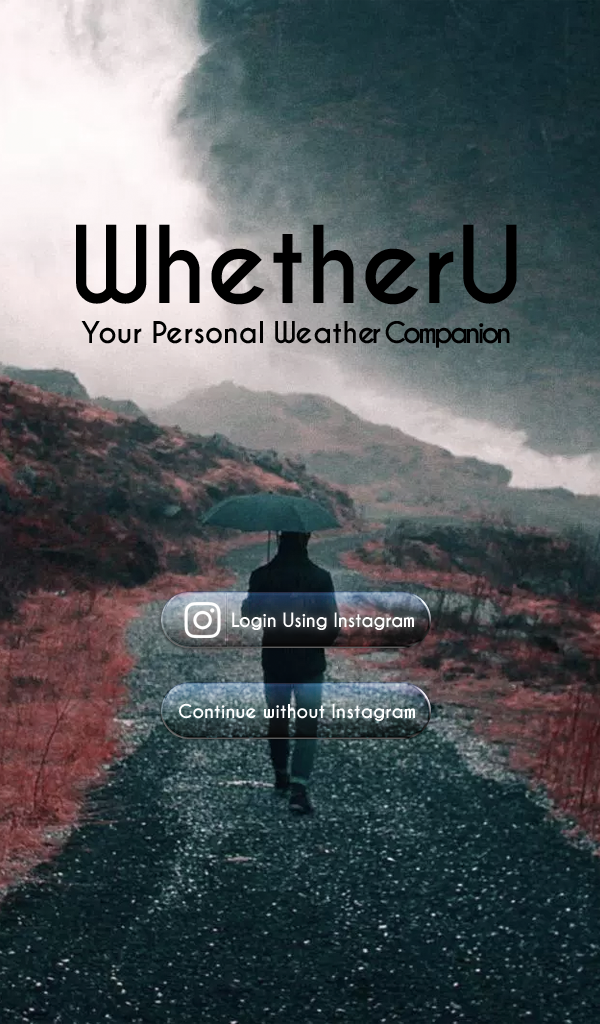
<style>
.page{position:relative;width:600px;height:1024px}
.page>*{position:absolute;margin:0}
.t1{font:28px/20px "CaviarDreams-Bold";color:#000000}
.t2{font:100px/20px "CaviarDreams-Bold";color:#000000}
.t3{font:28px/20px "CaviarDreams-Bold";letter-spacing:-0.12em;color:#000000}
.t4{font:18.5px "CaviarDreams-Bold";letter-spacing:-0.02em;color:#ffffff}
.t5{font:18px "CaviarDreams-Bold";color:#ffffff}
</style>
<div class="page">
<p class="t1" style="left:76px;top:224px;width:441px;height:124px"><span class="t2">WhetherU<br><br>              </span>Your Personal Weath<span class="t3">er Companion</span></p>
<p class="t4" style="left:232px;top:612px;width:182px;height:18px">Login Using Instagram</p>
<p class="t5" style="left:179px;top:703px;width:236px;height:18px">Continue without Instagram</p>
</div>
